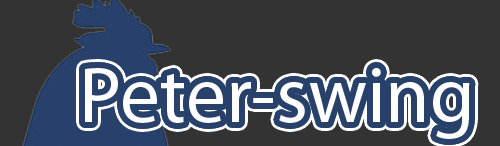
<style>
.page{position:relative;width:500px;height:146px;background:#333333}
.page>*{position:absolute;margin:0}
.t1{font:80px "MyriadPro-Regular";color:#ffffff}
</style>
<div class="page">
<p class="t1" style="left:85px;top:68px;width:385px;height:71px">Peter-swing</p>
</div>
